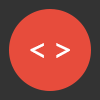
<style>
.page{position:relative;width:100px;height:100px;background:#e74c3c}
.page>*{position:absolute;margin:0}
.t1{font:36px "Actor-Regular";color:#ffffff}
</style>
<div class="page">
<p class="t1" style="left:30px;top:43px;width:40px;height:15px">&lt; &gt;</p>
</div>
